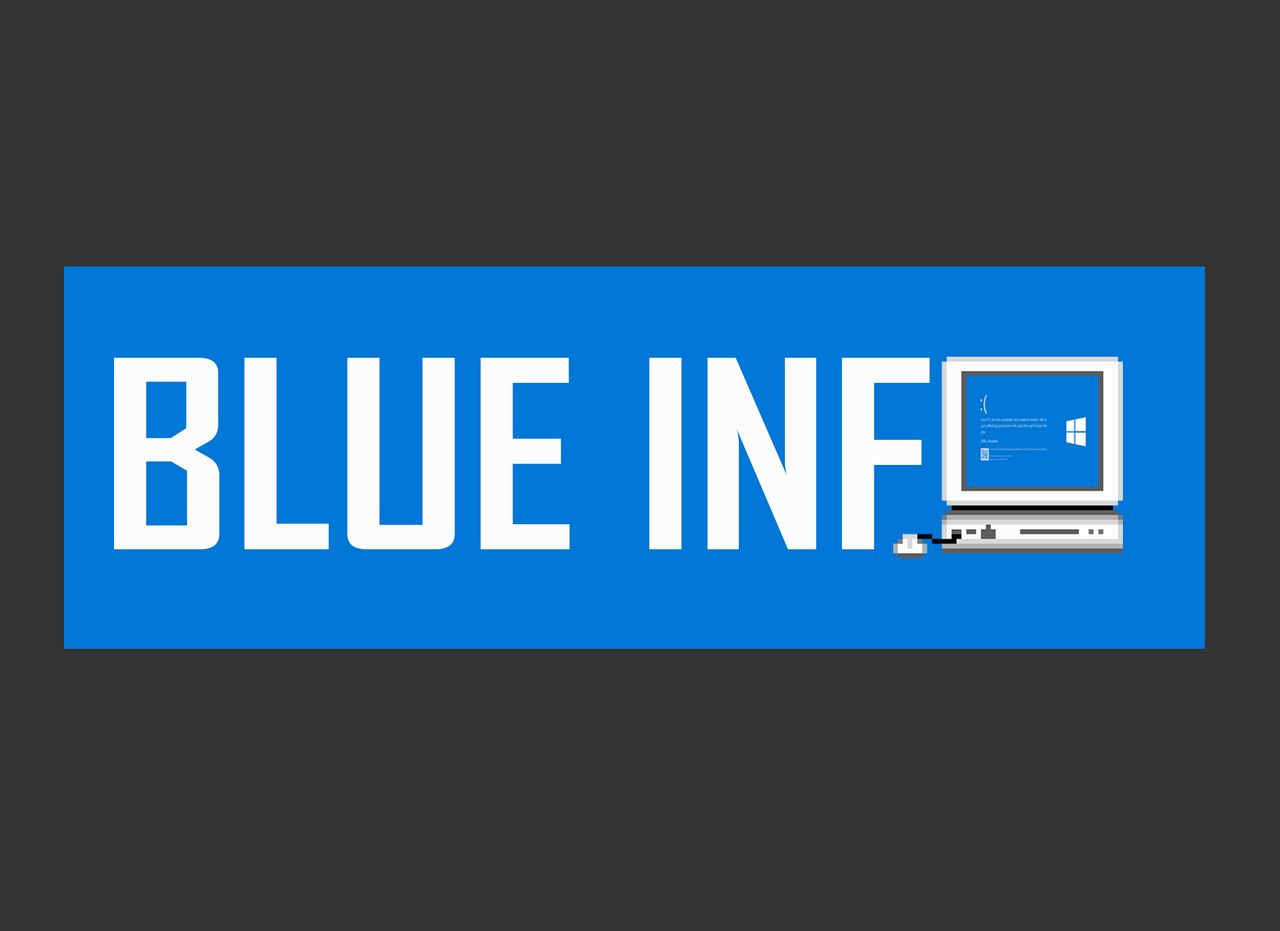
<style>
.page{position:relative;width:1280px;height:931px;background:#333333}
.page>*{position:absolute;margin:0}
.t1{font:250.4px "AgencyFB-Bold";color:#fcfcfc;scale:1.12 1}
</style>
<div class="page">
<p class="t1" style="left:114px;top:357px;width:816px;height:192px">BLUE INF</p>
</div>
